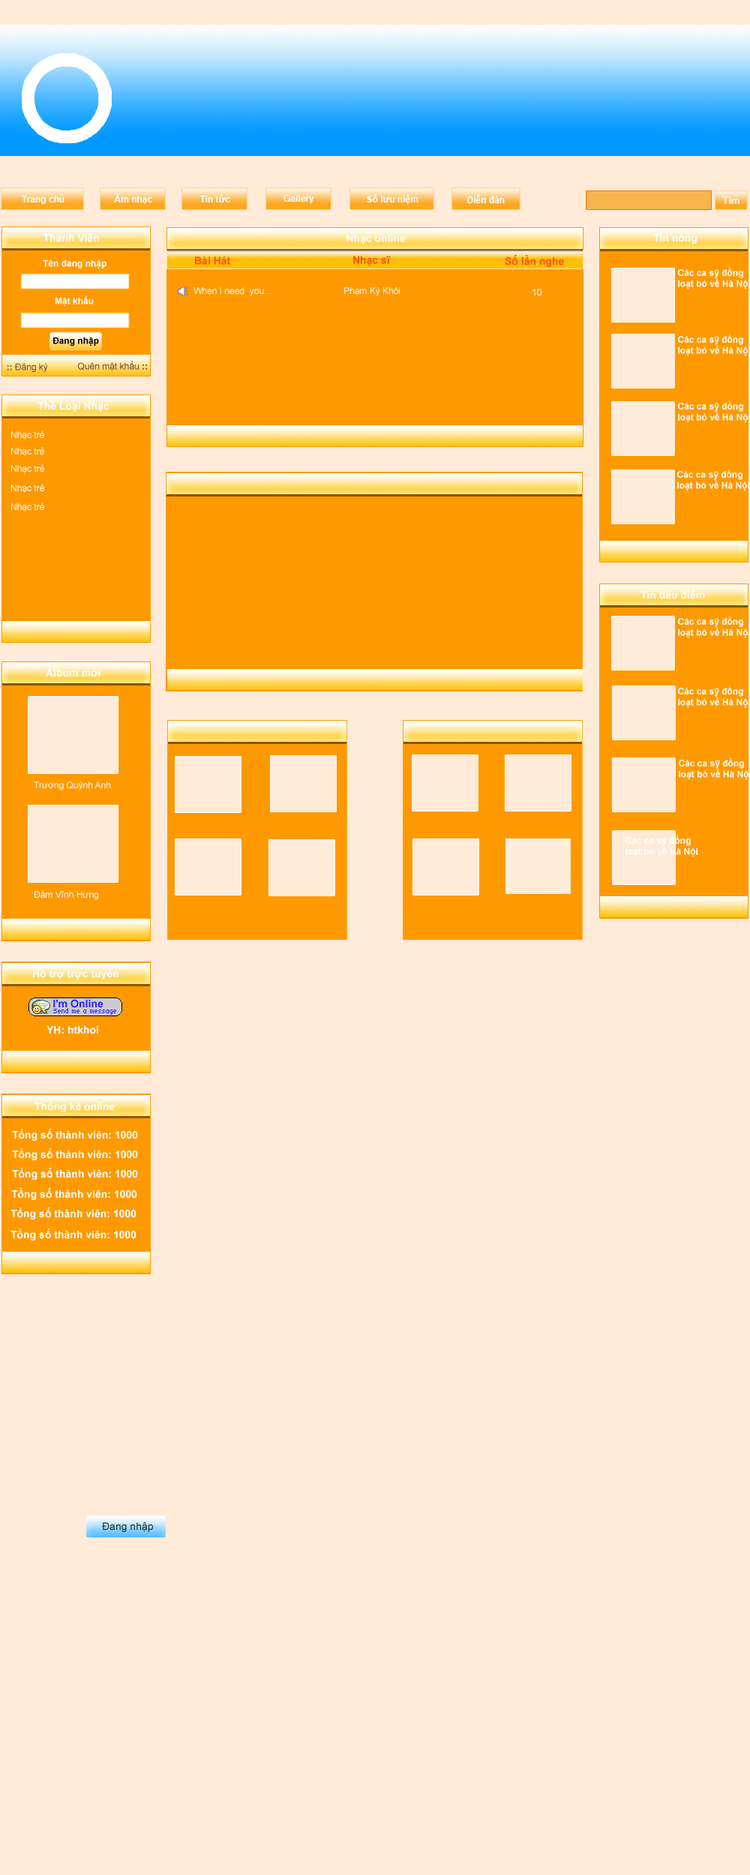
<style>
.page{position:relative;width:750px;height:1875px;background:#ffebd7}
.page>*{position:absolute;margin:0}
.t1{font:9px "Arial-BoldMT";color:#ffffff}
.t2{font:9.8px "Arial-BoldMT";color:#fefefe}
.t3{font:10.5px "Arial-BoldMT";color:#ffffff}
.t4{font:10.5px "Arial-BoldMT";color:#fefefe}
.t5{font:10.5px "Arial-BoldMT";color:#fe5401}
.t6{font:9px "ArialMT";color:#ffffff}
.t7{font:9px "Arial-BoldMT";color:#150116}
.t8{font:9px "ArialMT";color:#7a4343}
.t9{font:9px "Arial-BoldMT";color:#7a4343}
.t10{font:10.5px "ArialMT";color:#1f3730}
</style>
<div class="page">
<p class="t1" style="left:22px;top:194px;width:42px;height:10px">Trang chủ</p>
<p class="t1" style="left:114px;top:194px;width:38px;height:10px">Âm nhạc</p>
<p class="t1" style="left:200px;top:195px;width:30px;height:7px">Tin tức</p>
<p class="t1" style="left:284px;top:195px;width:30px;height:8px">Gallery</p>
<p class="t1" style="left:367px;top:194px;width:51px;height:10px">Số lưu niệm</p>
<p class="t1" style="left:467px;top:194px;width:38px;height:9px">Diễn đàn</p>
<p class="t2" style="left:722px;top:196px;width:18px;height:8px">Tìm</p>
<p class="t3" style="left:44px;top:233px;width:55px;height:9px">Thành Viên</p>
<p class="t3" style="left:653px;top:233px;width:44px;height:11px">Tin nóng</p>
<p class="t4" style="left:346px;top:234px;width:60px;height:10px">Nhạc online</p>
<p class="t5" style="left:195px;top:256px;width:36px;height:9px">Bài Hát</p>
<p class="t5" style="left:353px;top:256px;width:38px;height:10px">Nhạc sĩ</p>
<p class="t5" style="left:505px;top:255px;width:59px;height:12px">Số lần nghe</p>
<p class="t1" style="left:43px;top:260px;width:63px;height:9px">Tên đang nhập</p>
<p class="t1" style="left:678px;top:267px;width:72px;height:23px">Các ca sỹ đồng<br>loạt bỏ về Hà Nội</p>
<p class="t6" style="left:194px;top:287px;width:77px;height:9px">When I need  you...</p>
<p class="t6" style="left:344px;top:287px;width:56px;height:9px">Phạm Kỳ Khôi</p>
<p class="t6" style="left:532px;top:289px;width:10px;height:7px">10</p>
<p class="t1" style="left:56px;top:296px;width:38px;height:11px">Mật khẩu</p>
<p class="t7" style="left:52px;top:337px;width:47px;height:9px">Đang nhập</p>
<p class="t1" style="left:678px;top:334px;width:72px;height:22px">Các ca sỹ đồng<br>loạt bỏ về Hà Nội</p>
<p class="t8" style="left:7px;top:363px;width:41px;height:9px"><span class="t9">:: </span>Đăng ký</p>
<p class="t8" style="left:78px;top:361px;width:69px;height:10px">Quên mật khẩu<span class="t9"> ::</span></p>
<p class="t3" style="left:38px;top:400px;width:72px;height:12px">Thể Loại Nhạc</p>
<p class="t1" style="left:678px;top:400px;width:72px;height:23px">Các ca sỹ đồng<br>loạt bỏ về Hà Nội</p>
<p class="t6" style="left:11px;top:430px;width:33px;height:10px">Nhạc trẻ</p>
<p class="t6" style="left:11px;top:447px;width:33px;height:9px">Nhạc trẻ</p>
<p class="t6" style="left:11px;top:464px;width:33px;height:9px">Nhạc trẻ</p>
<p class="t1" style="left:677px;top:469px;width:72px;height:22px">Các ca sỹ đồng<br>loạt bỏ về Hà Nội</p>
<p class="t6" style="left:11px;top:484px;width:33px;height:9px">Nhạc trẻ</p>
<p class="t6" style="left:11px;top:502px;width:33px;height:10px">Nhạc trẻ</p>
<p class="t3" style="left:640px;top:589px;width:65px;height:10px">Tin tiêu điểm</p>
<p class="t1" style="left:678px;top:616px;width:72px;height:22px">Các ca sỹ đồng<br>loạt bỏ về Hà Nội</p>
<p class="t3" style="left:46px;top:668px;width:54px;height:9px">Album mới</p>
<p class="t1" style="left:678px;top:686px;width:72px;height:22px">Các ca sỹ đồng<br>loạt bỏ về Hà Nội</p>
<p class="t1" style="left:679px;top:758px;width:72px;height:22px">Các ca sỹ đồng<br>loạt bỏ về Hà Nội</p>
<p class="t6" style="left:34px;top:782px;width:77px;height:8px">Trương Quỳnh Anh</p>
<p class="t1" style="left:626px;top:835px;width:72px;height:22px">Các ca sỹ đồng<br>loạt bỏ về Hà Nội</p>
<p class="t6" style="left:34px;top:891px;width:64px;height:9px">Đàm Vĩnh Hưng</p>
<p class="t3" style="left:33px;top:968px;width:85px;height:12px">Hỗ trợ trực tuyến</p>
<p class="t3" style="left:46px;top:1026px;width:52px;height:8px">YH: htkhoi</p>
<p class="t3" style="left:34px;top:1100px;width:81px;height:12px">Thống kê online</p>
<p class="t3" style="left:12px;top:1129px;width:126px;height:12px">Tổng số thành viên: 1000</p>
<p class="t3" style="left:12px;top:1148px;width:126px;height:12px">Tổng số thành viên: 1000</p>
<p class="t3" style="left:12px;top:1168px;width:126px;height:12px">Tổng số thành viên: 1000</p>
<p class="t3" style="left:11px;top:1188px;width:126px;height:12px">Tổng số thành viên: 1000</p>
<p class="t3" style="left:10px;top:1208px;width:126px;height:12px">Tổng số thành viên: 1000</p>
<p class="t3" style="left:10px;top:1228px;width:126px;height:12px">Tổng số thành viên: 1000</p>
<p class="t10" style="left:102px;top:1522px;width:51px;height:10px">Đang nhập</p>
</div>
